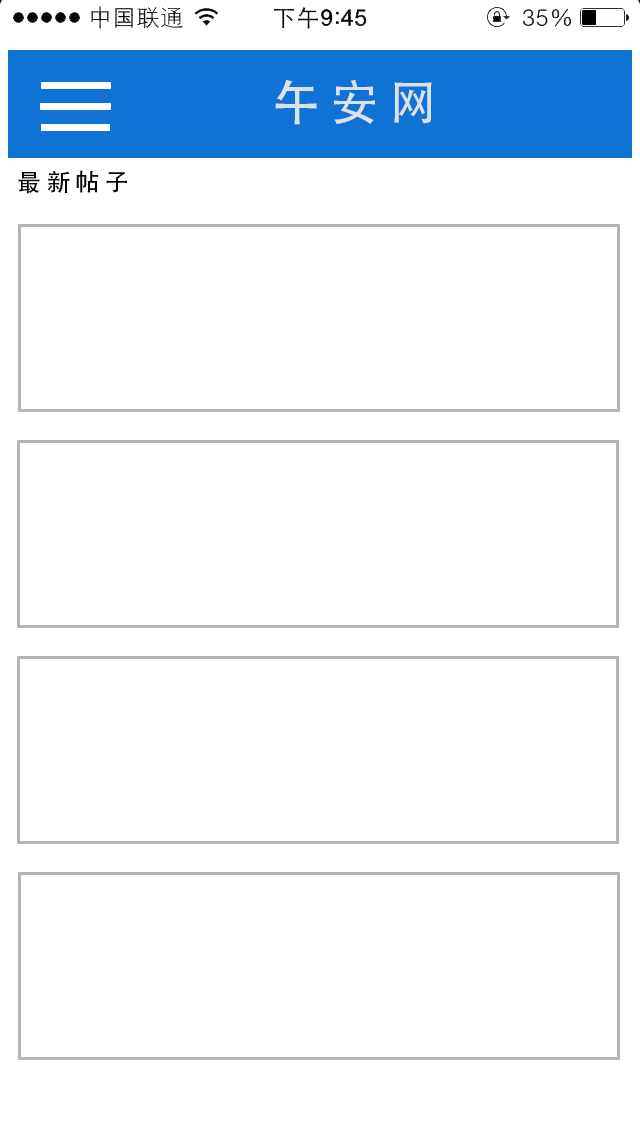
<style>
.page{position:relative;width:640px;height:1130px;background:#ffffff}
.page>*{position:absolute;margin:0}
.t1{font:48px "AdobeHeitiStd-Regular";color:#d9e1e9}
.t2{font:24px "AdobeHeitiStd-Regular";color:#060607}
</style>
<div class="page">
<p class="t1" style="left:275px;top:79px;width:157px;height:46px">午 安 网</p>
<p class="t2" style="left:18px;top:170px;width:109px;height:24px">最 新 帖 子</p>
</div>
